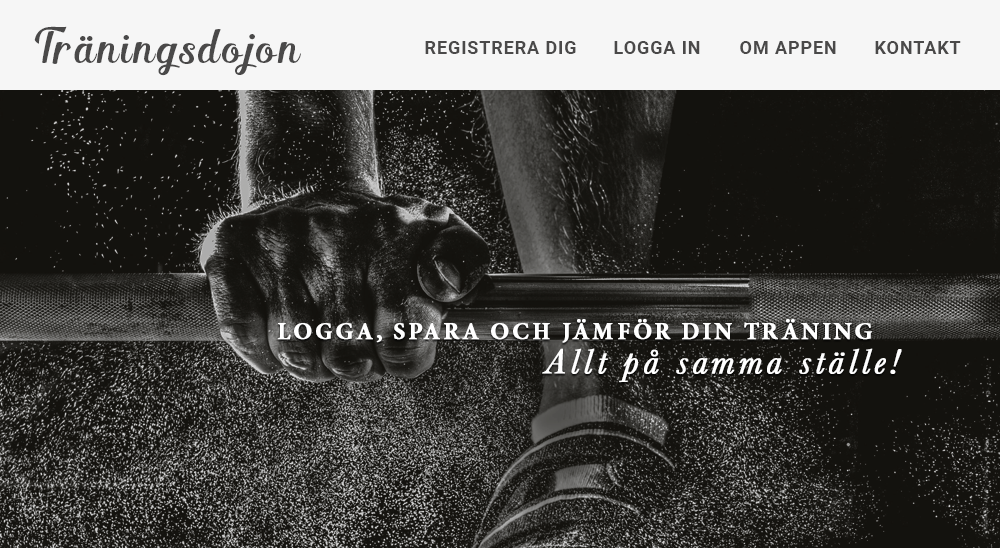
<style>
.page{position:relative;width:1000px;height:548px}
.page>*{position:absolute;margin:0}
.t1{font:48px "ShintiaScript";letter-spacing:0.05em;color:#4a4949}
.t2{font:18px "Roboto-Bold";letter-spacing:0.05em;color:#4a4949}
.t3{font:24px "MinionPro-Bold";letter-spacing:0.1em;color:#ffffff;text-transform:uppercase;font-weight:bold}
.t4{font:36px "Baskerville-Italic";letter-spacing:0.1em;color:#ffffff;font-weight:bold}
</style>
<div class="page">
<p class="t1" style="left:34px;top:26px;width:267px;height:50px">Träningsdojon</p>
<p class="t2" style="left:425px;top:41px;width:151px;height:13px">REGISTRERA DIG</p>
<p class="t2" style="left:614px;top:41px;width:86px;height:13px">LOGGA IN</p>
<p class="t2" style="left:740px;top:41px;width:96px;height:13px">OM APPEN</p>
<p class="t2" style="left:875px;top:41px;width:86px;height:13px">KONTAKT</p>
<p class="t3" style="left:277px;top:319px;width:595px;height:24px">Logga, spara och jämför din träning</p>
<p class="t4" style="left:542px;top:348px;width:360px;height:34px">Allt på samma ställe!</p>
</div>
